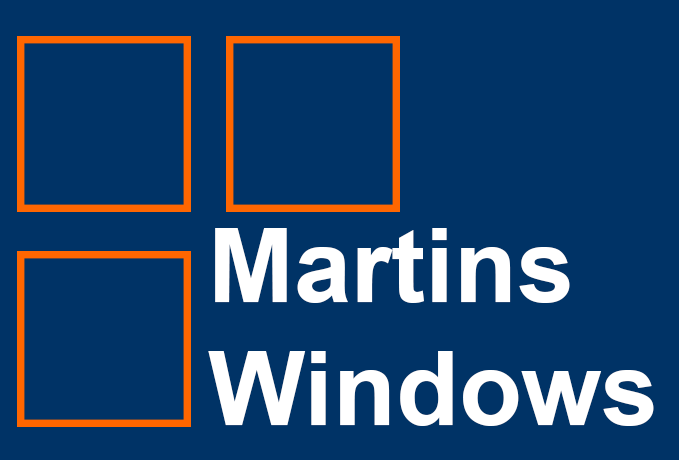
<style>
.page{position:relative;width:679px;height:460px;background:#003366}
.page>*{position:absolute;margin:0}
.t1{font:102.8px "Arial-BoldMT";color:#ffffff}
</style>
<div class="page">
<p class="t1" style="left:208px;top:228px;width:446px;height:198px">Martins <br>Windows</p>
</div>
